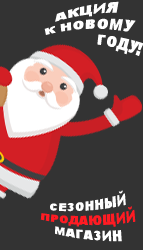
<style>
.page{position:relative;width:143px;height:250px;background:#333333}
.page>*{position:absolute;margin:0}
.t1{font:12px "Arial-Black";color:#ffffff}
.t2{font:12px "Arial-Black";color:#ff1b23}
</style>
<div class="page">
<p class="t1" style="left:44px;top:1px;width:100px;height:55px;text-align:center">АКЦИЯ <br>К НОВОМУ<br>              ГОДУ!</p>
<p class="t2" style="left:40px;top:190px;width:96px;height:52px;text-align:center"><span class="t1">СЕЗОННЫЙ<br></span>ПРОДАЮЩИЙ<br><span class="t1">МАГАЗИН</span></p>
</div>
